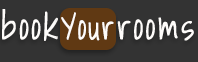
<style>
.page{position:relative;width:198px;height:62px;background:#333333}
.page>*{position:absolute;margin:0}
.t1{font:36.2px "ShadowsIntoLight";letter-spacing:0.042em;color:#fefcfa;font-weight:bold}
.t2{font:34.8px "ShadowsIntoLight";letter-spacing:0.022em;color:#fefcfa;font-weight:bold;scale:0.91 1}
</style>
<div class="page">
<p class="t1" style="left:2px;top:9px;width:192px;height:32px">book   rooms</p>
<p class="t2" style="left:61px;top:12px;width:53px;height:29px">Your</p>
</div>
